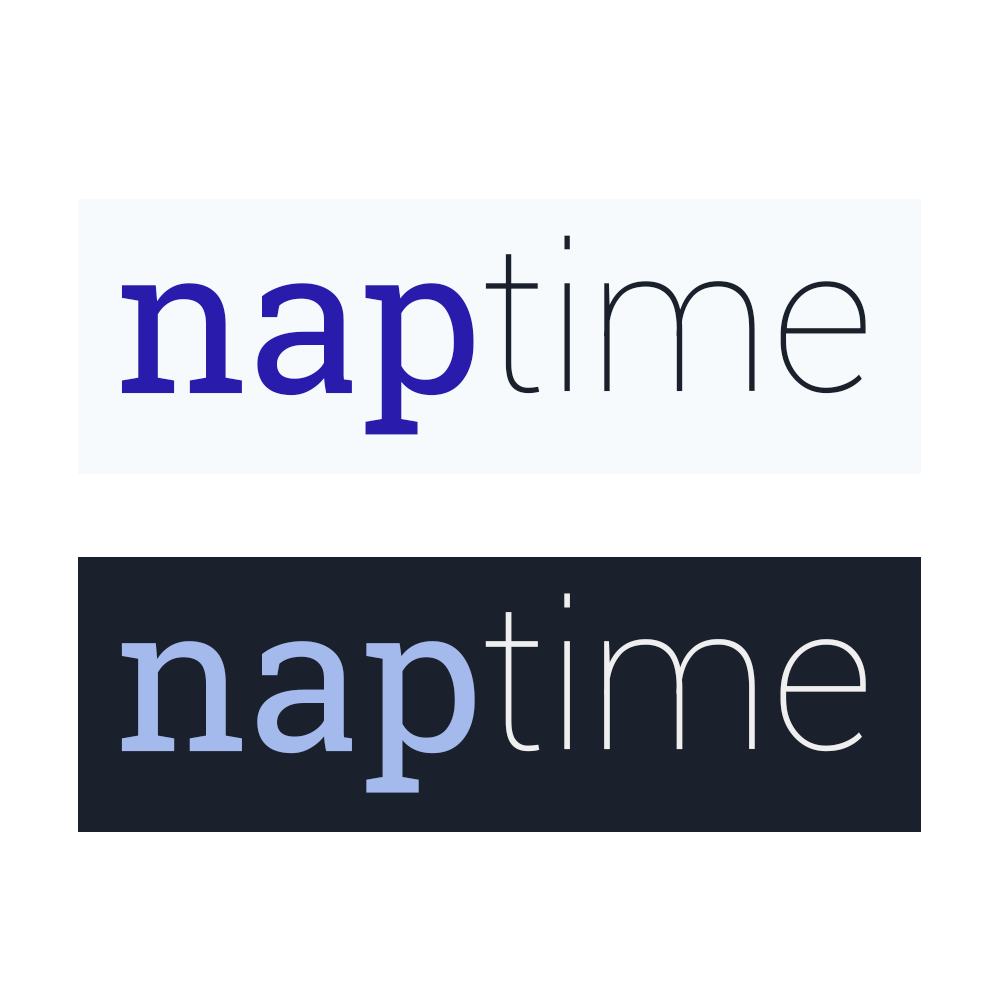
<style>
.page{position:relative;width:1000px;height:1000px;background:#ffffff}
.page>*{position:absolute;margin:0}
.t1{font:203.6px "Roboto-Thin";color:#1a202c}
.t2{font:203.6px "RobotoSlab-Regular";color:#291cad}
.t3{font:203.6px "Roboto-Thin";color:#efefef}
.t4{font:203.6px "RobotoSlab-Regular";color:#a4baed}
</style>
<div class="page">
<p class="t1" style="left:485px;top:235px;width:381px;height:159px">time</p>
<p class="t2" style="left:121px;top:283px;width:353px;height:152px">nap</p>
<p class="t3" style="left:485px;top:593px;width:381px;height:159px">time</p>
<p class="t4" style="left:121px;top:641px;width:354px;height:152px">nap</p>
</div>
